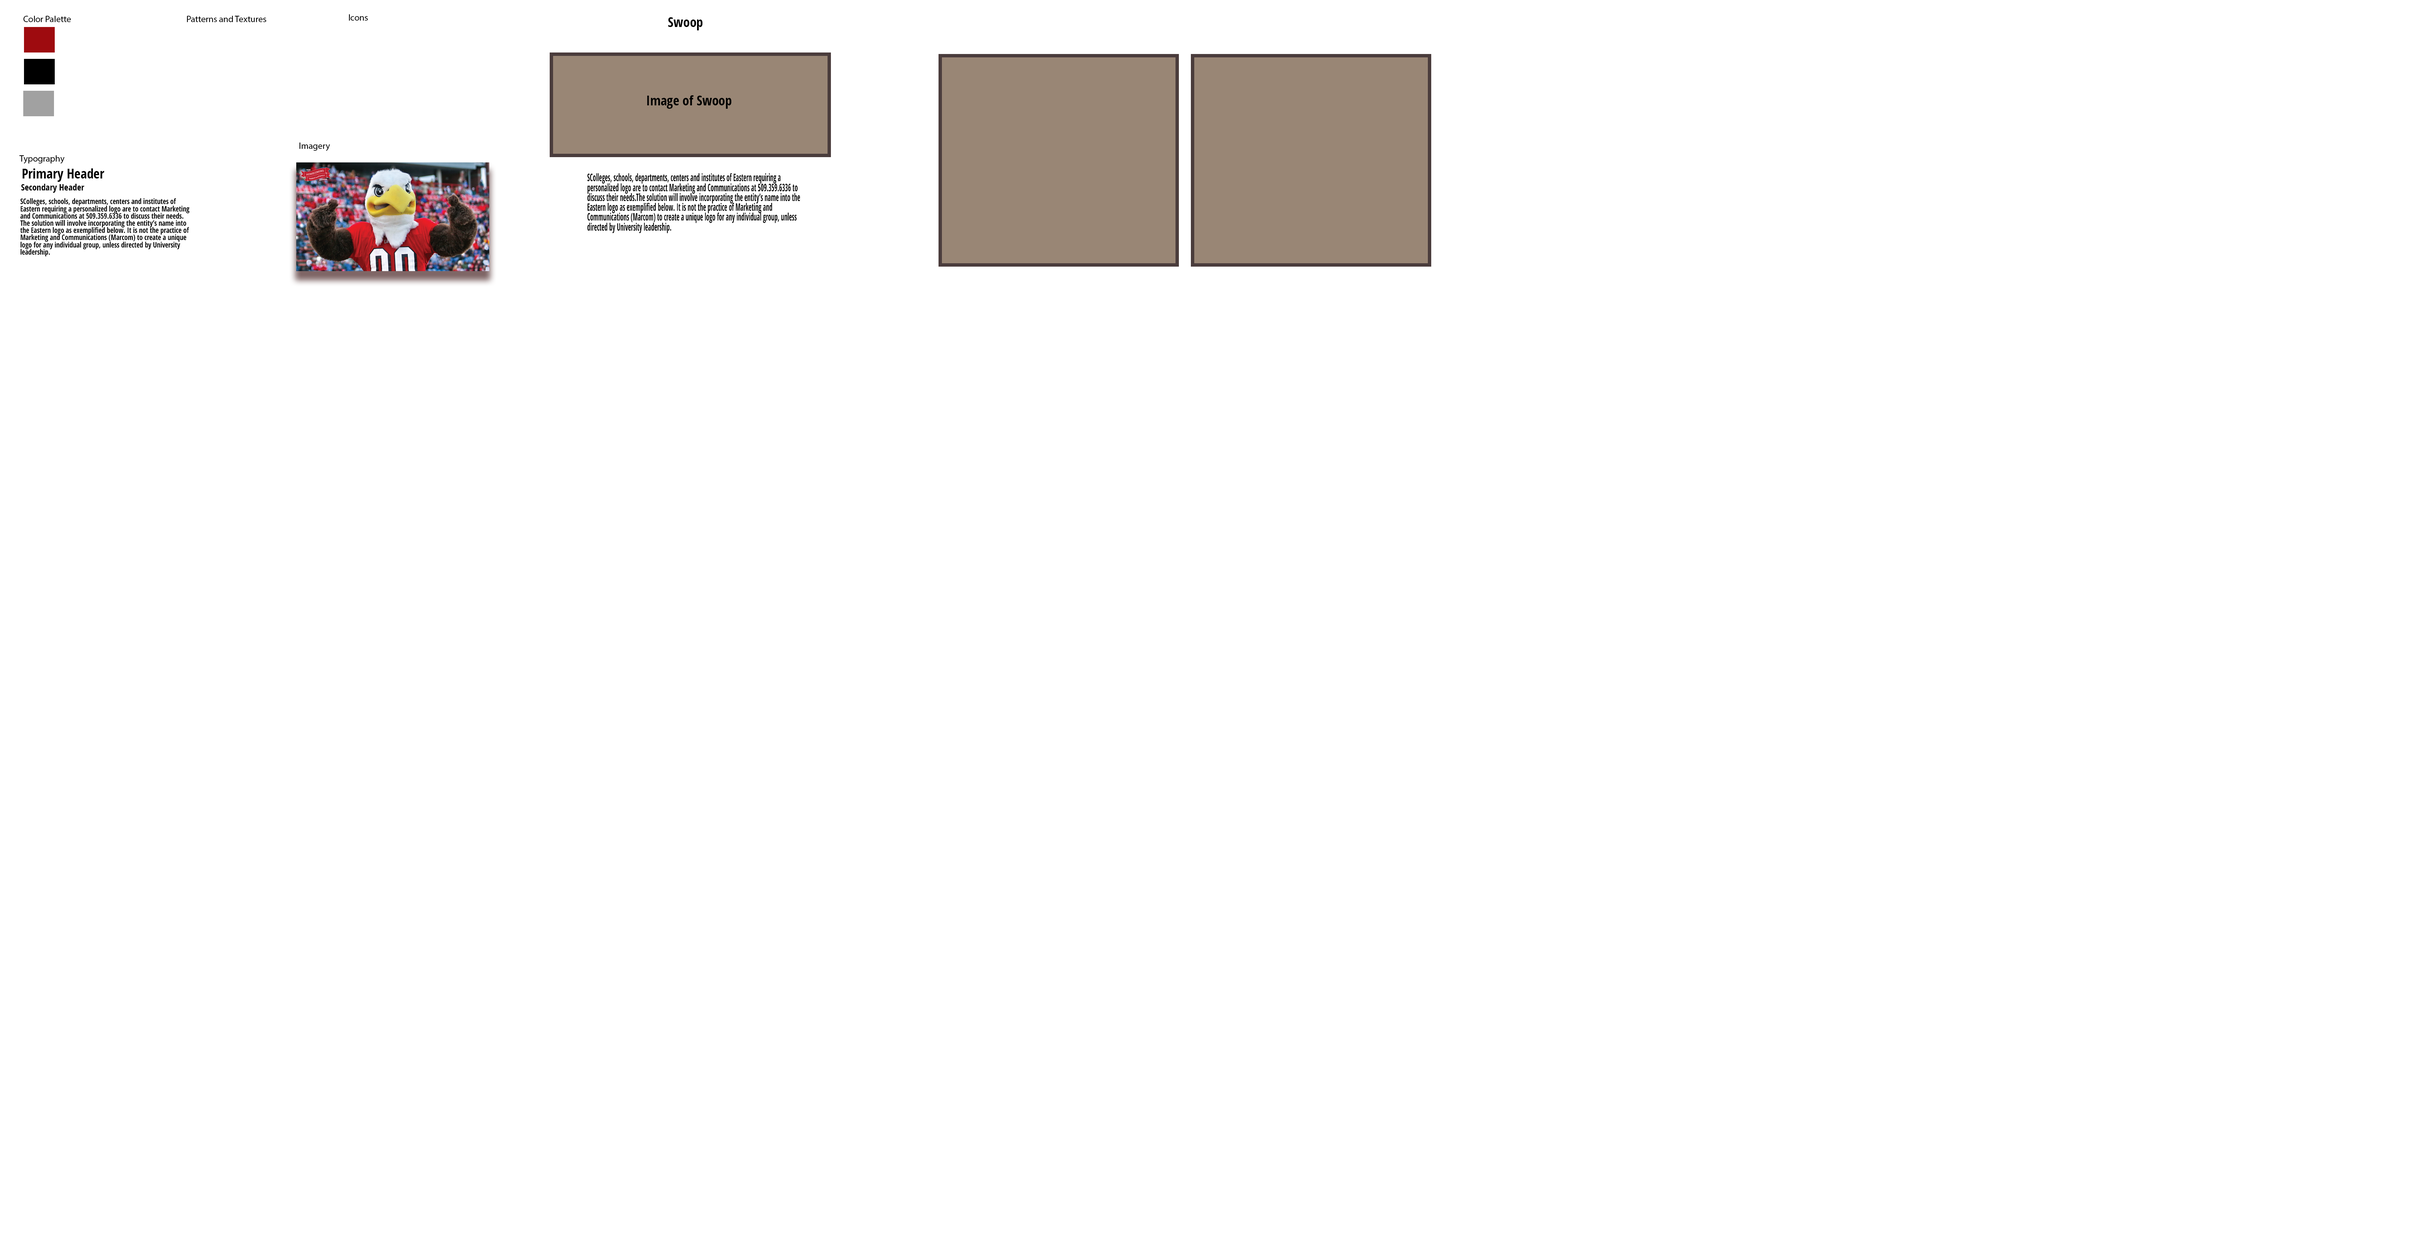
<style>
.page{position:relative;width:2432px;height:1248px;background:#ffffff}
.page>*{position:absolute;margin:0}
.t1{font:9px "MyriadPro-Regular";color:#000000}
.t2{font:13.5px "OpenSans-CondensedBold";color:#000000}
.t3{font:10.4px "OpenSans-CondensedBold";color:#000000;scale:0.62 1}
.t4{font:9px "OpenSans-CondensedBold";color:#000000}
.t5{font:7.6px "OpenSans-CondensedBold";color:#000000;scale:0.91 1}
</style>
<div class="page">
<p class="t1" style="left:23px;top:16px;width:48px;height:6px">Color Palette</p>
<p class="t1" style="left:187px;top:16px;width:79px;height:6px">Patterns and Textures</p>
<p class="t1" style="left:349px;top:14px;width:19px;height:7px">Icons</p>
<p class="t2" style="left:668px;top:17px;width:35px;height:13px">Swoop</p>
<p class="t2" style="left:647px;top:95px;width:85px;height:14px">Image of Swoop</p>
<p class="t1" style="left:299px;top:143px;width:31px;height:8px">Imagery</p>
<p class="t1" style="left:19px;top:155px;width:46px;height:9px">Typography</p>
<p class="t2" style="left:23px;top:168px;width:81px;height:14px">Primary Header</p>
<p class="t3" style="left:587px;top:173px;width:213px;height:60px">SColleges, schools, departments, centers and institutes of Eastern requiring a personalized logo are to contact Marketing and Communications at 509.359.6336 to discuss their needs.The solution will involve incorporating the entity’s name into the Eastern logo as exemplified below. It is not the practice of Marketing and Communications (Marcom) to create a unique logo for any individual group, unless directed by University leadership.</p>
<p class="t4" style="left:21px;top:184px;width:63px;height:9px">Secondary Header</p>
<p class="t5" style="left:20px;top:198px;width:169px;height:59px">SColleges, schools, departments, centers and institutes of<br>Eastern requiring a personalized logo are to contact Marketing<br>and Communications at 509.359.6336 to discuss their needs.<br>The solution will involve incorporating the entity’s name into<br>the Eastern logo as exemplified below. It is not the practice of<br>Marketing and Communications (Marcom) to create a unique<br>logo for any individual group, unless directed by University<br>leadership.</p>
</div>
